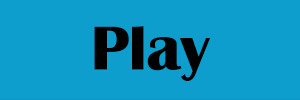
<style>
.page{position:relative;width:300px;height:100px;background:#0e9ecd}
.page>*{position:absolute;margin:0}
.t1{font:64.1px "BritannicBold";color:#010000}
</style>
<div class="page">
<p class="t1" style="left:94px;top:26px;width:116px;height:55px">Play</p>
</div>
